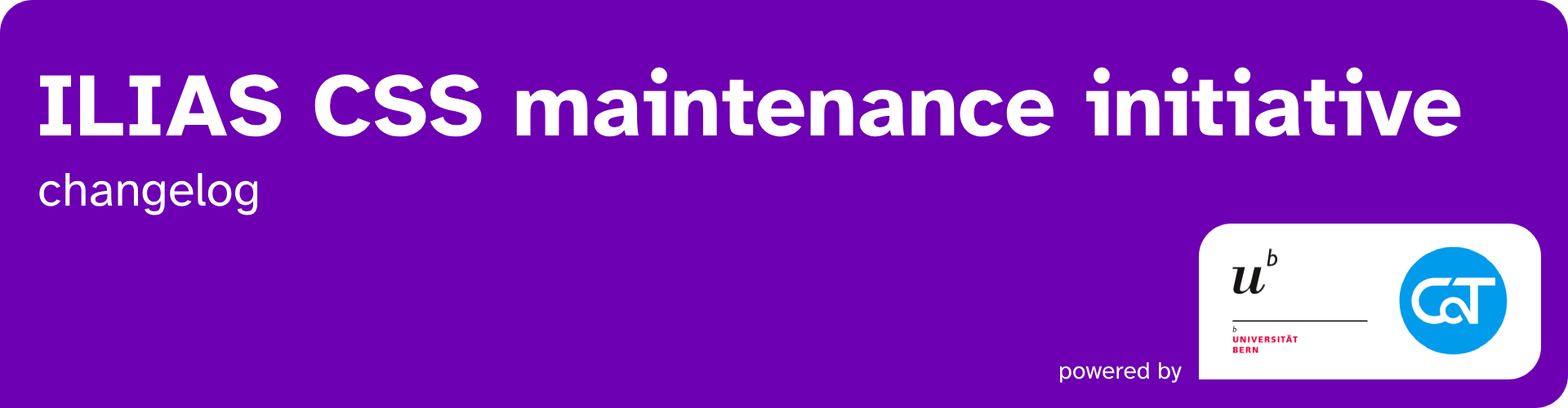
<style>
.page{position:relative;width:1568px;height:408px;background:#6d00b2}
.page>*{position:absolute;margin:0}
.t1{font:89.8px "AtkinsonHyperlegible-Bold";color:#ffffff}
.t2{font:49px "AtkinsonHyperlegible-Regular";color:#ffffff}
.t3{font:24.5px "AtkinsonHyperlegible-Regular";color:#ffffff}
</style>
<div class="page">
<p class="t1" style="left:40px;top:67px;width:1421px;height:70px">ILIAS CSS maintenance initiative</p>
<p class="t2" style="left:39px;top:172px;width:219px;height:44px">changelog</p>
<p class="t3" style="left:1060px;top:362px;width:122px;height:21px">powered by</p>
</div>
